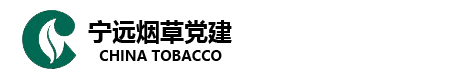
<style>
.page{position:relative;width:465px;height:76px;background:#ffffff}
.page>*{position:absolute;margin:0}
.t1{font:24px "MicrosoftYaHei-Bold";color:#000000}
.t2{font:14px "MicrosoftYaHei-Bold";color:#000000}
</style>
<div class="page">
<p class="t1" style="left:88px;top:20px;width:144px;height:24px">宁远烟草党建</p>
<p class="t2" style="left:99px;top:50px;width:123px;height:11px">CHINA TOBACCO</p>
</div>
